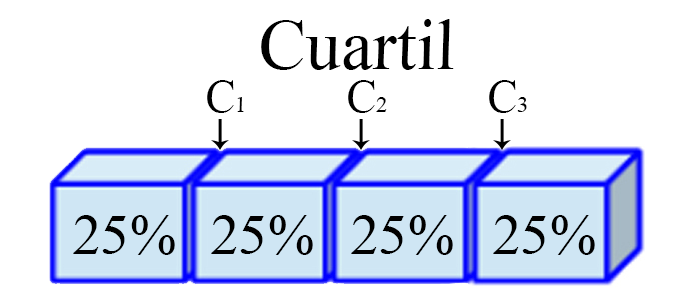
<style>
.page{position:relative;width:696px;height:308px;background:#ffffff}
.page>*{position:absolute;margin:0}
.t1{font:71.6px "TimesNewRomanPSMT";color:#000000;font-style:italic}
.t2{font:45.4px "TimesNewRomanPSMT";color:#000000;font-style:italic}
.t3{font:22.8px "TimesNewRomanPSMT";color:#000000;font-style:italic}
.t4{font:57.5px "TimesNewRomanPSMT";color:#000000;font-style:italic}
</style>
<div class="page">
<p class="t1" style="left:261px;top:19px;width:193px;height:51px">Cuartil</p>
<p class="t2" style="left:207px;top:80px;width:37px;height:33px">C<span class="t3">1</span></p>
<p class="t2" style="left:348px;top:80px;width:39px;height:33px">C<span class="t3">2</span></p>
<p class="t2" style="left:489px;top:80px;width:38px;height:33px">C<span class="t3">3</span></p>
<p class="t4" style="left:73px;top:215px;width:102px;height:40px">25%</p>
<p class="t4" style="left:211px;top:215px;width:102px;height:40px">25%</p>
<p class="t4" style="left:351px;top:215px;width:102px;height:40px">25%</p>
<p class="t4" style="left:493px;top:215px;width:102px;height:40px">25%</p>
</div>
